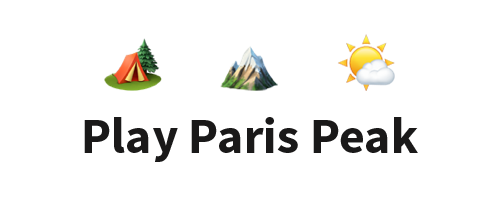
<style>
.page{position:relative;width:500px;height:200px;background:#ffffff}
.page>*{position:absolute;margin:0}
.t1{font:50px "SourceSansPro-Bold";color:#1a1919}
</style>
<div class="page">
<p class="t1" style="left:84px;top:117px;width:334px;height:45px">Play Paris Peak</p>
</div>
